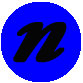
<style>
.page{position:relative;width:83px;height:83px;background:#0000ff}
.page>*{position:absolute;margin:0}
.t1{font:95px "AGaramondPro-BoldItalic";color:#050505;font-weight:bold;font-style:italic}
</style>
<div class="page">
<p class="t1" style="left:13px;top:22px;width:54px;height:41px">n</p>
</div>
